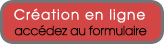
<style>
.page{position:relative;width:164px;height:44px;background:#d24645}
.page>*{position:absolute;margin:0}
.t1{font:13.7px "AvantGardeLT-Book";letter-spacing:0.08em;color:#ffffff}
.t2{font:12.7px "AvantGardeLT-Book";letter-spacing:-0.03em;color:#000203}
</style>
<div class="page">
<p class="t1" style="left:14px;top:8px;width:131px;height:15px">Création en ligne</p>
<p class="t2" style="left:14px;top:25px;width:133px;height:11px">accédez au formulaire</p>
</div>
